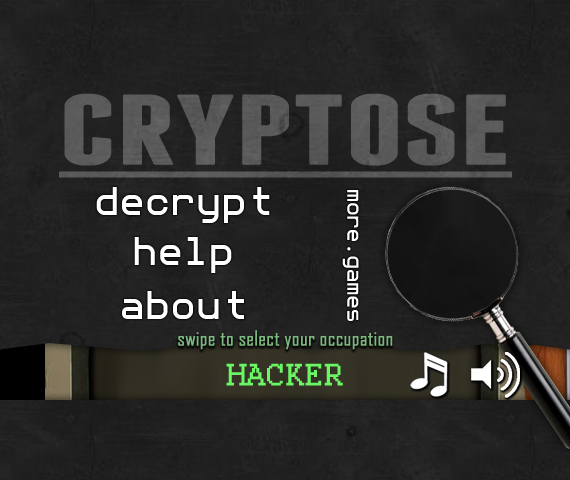
<style>
.page{position:relative;width:570px;height:480px}
.page>*{position:absolute;margin:0}
.t1{font:100px "Franchise-Bold";color:#5a5a5a;text-decoration:underline;scale:1.6 1}
.t2{font:36px "monoMMM5-Regular";letter-spacing:0.04em;color:#ffffff}
.t3{font:20px "monoMMM5-Regular";color:#ffffff}
.t4{font:20px "AgencyFB-Reg";color:#7cb97f;font-weight:bold}
</style>
<div class="page">
<p class="t1" style="left:59px;top:93px;width:453px;height:85px">CRYPTOSE</p>
<p class="t2" style="left:96px;top:187px;width:174px;height:36px">decrypt</p>
<p class="t3" style="left:342px;top:190px;width:17px;height:131px;rotate:90deg">more.games</p>
<p class="t2" style="left:134px;top:237px;width:98px;height:36px">help</p>
<p class="t2" style="left:122px;top:291px;width:122px;height:28px">about</p>
<p class="t4" style="left:178px;top:330px;width:215px;height:20px">swipe to select your occupation</p>
</div>
